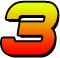
<style>
.page{position:relative;width:60px;height:58px;background:#ffffff}
.page>*{position:absolute;margin:0}
.t1{font:100px "Bitsumishi";letter-spacing:-0.08em;font-style:italic;scale:0.93 1}
</style>
<div class="page">
<p class="t1" style="left:2px;top:2px;width:56px;height:53px">3</p>
</div>
